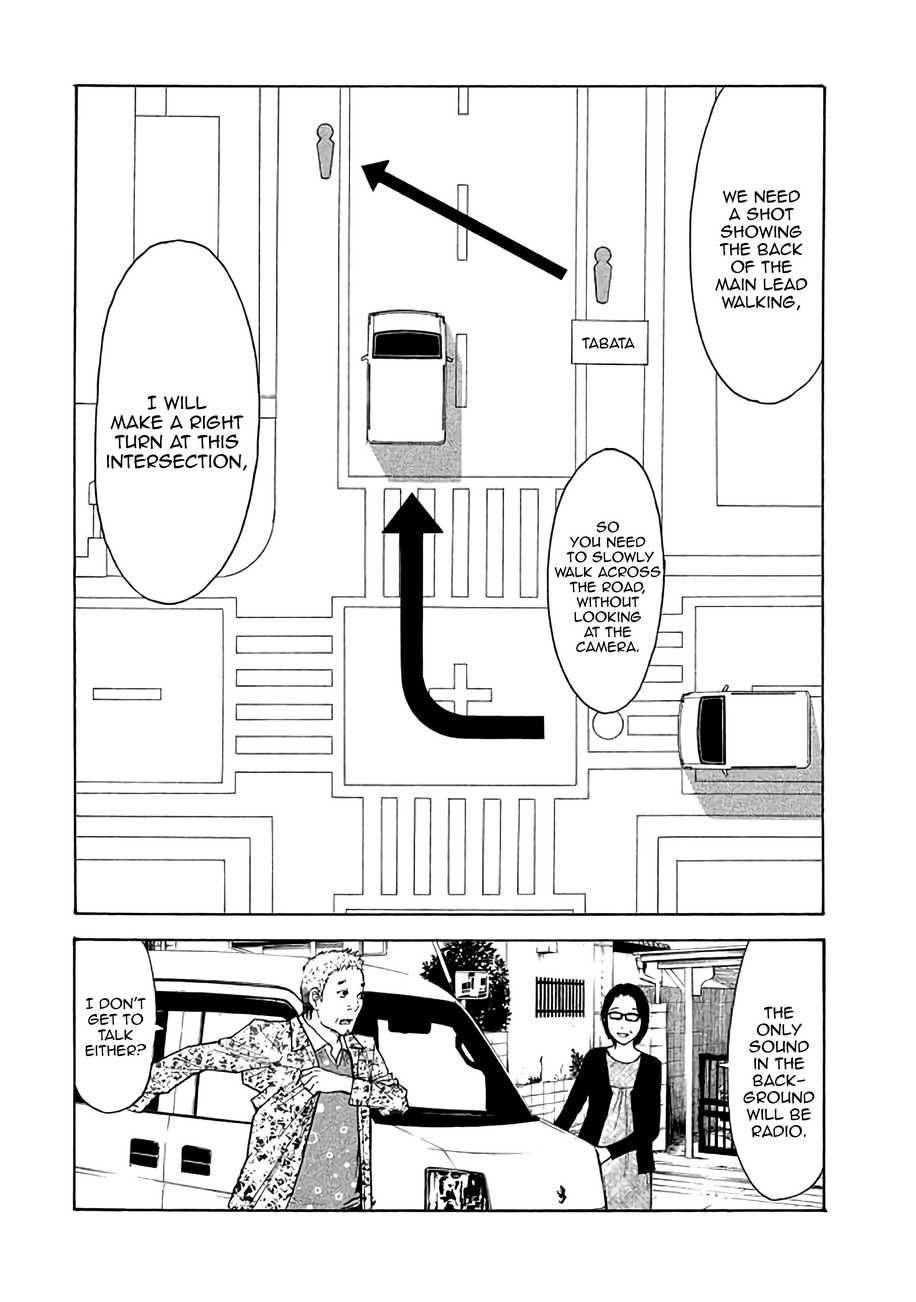
<style>
.page{position:relative;width:916px;height:1302px;background:#ffffff}
.page>*{position:absolute;margin:0}
.t1{font:14.6px "AnimeAce2.0BB";color:#000000}
.t2{font:13px "AnimeAce2.0BB";color:#000000}
.t3{font:16.3px "AnimeAce2.0BB";color:#000000}
.t4{font:12.5px "AnimeAce2.0BB";color:#000000}
.t5{font:14.1px "AnimeAce2.0BB";color:#000000}
</style>
<div class="page">
<p class="t1" style="left:715px;top:190px;width:92px;height:120px;text-align:center">we need<br>a shot showing the back of the main lead walking,</p>
<p class="t2" style="left:582px;top:337px;width:53px;height:12px">Tabata</p>
<p class="t3" style="left:107px;top:396px;width:140px;height:75px;text-align:center">I will <br>make a right turn at this <br>intersection,</p>
<p class="t4" style="left:554px;top:521px;width:107px;height:132px;text-align:center">so <br>you need<br> to slowly walk across the road,<br>without<br>looking <br>at the <br>camera.</p>
<p class="t2" style="left:85px;top:997px;width:61px;height:59px;text-align:center">I don't get to  talk either?</p>
<p class="t5" style="left:743px;top:1006px;width:71px;height:132px;text-align:center">The <br>only sound <br>in the back-<br>ground will be radio.</p>
</div>
